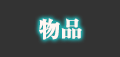
<style>
.page{position:relative;width:120px;height:57px;background:#333333}
.page>*{position:absolute;margin:0}
.t1{font:22px "RyuminPr6N-ExBold";color:#fff6f2;font-weight:bold}
</style>
<div class="page">
<p class="t1" style="left:39px;top:18px;width:43px;height:22px">物品</p>
</div>
